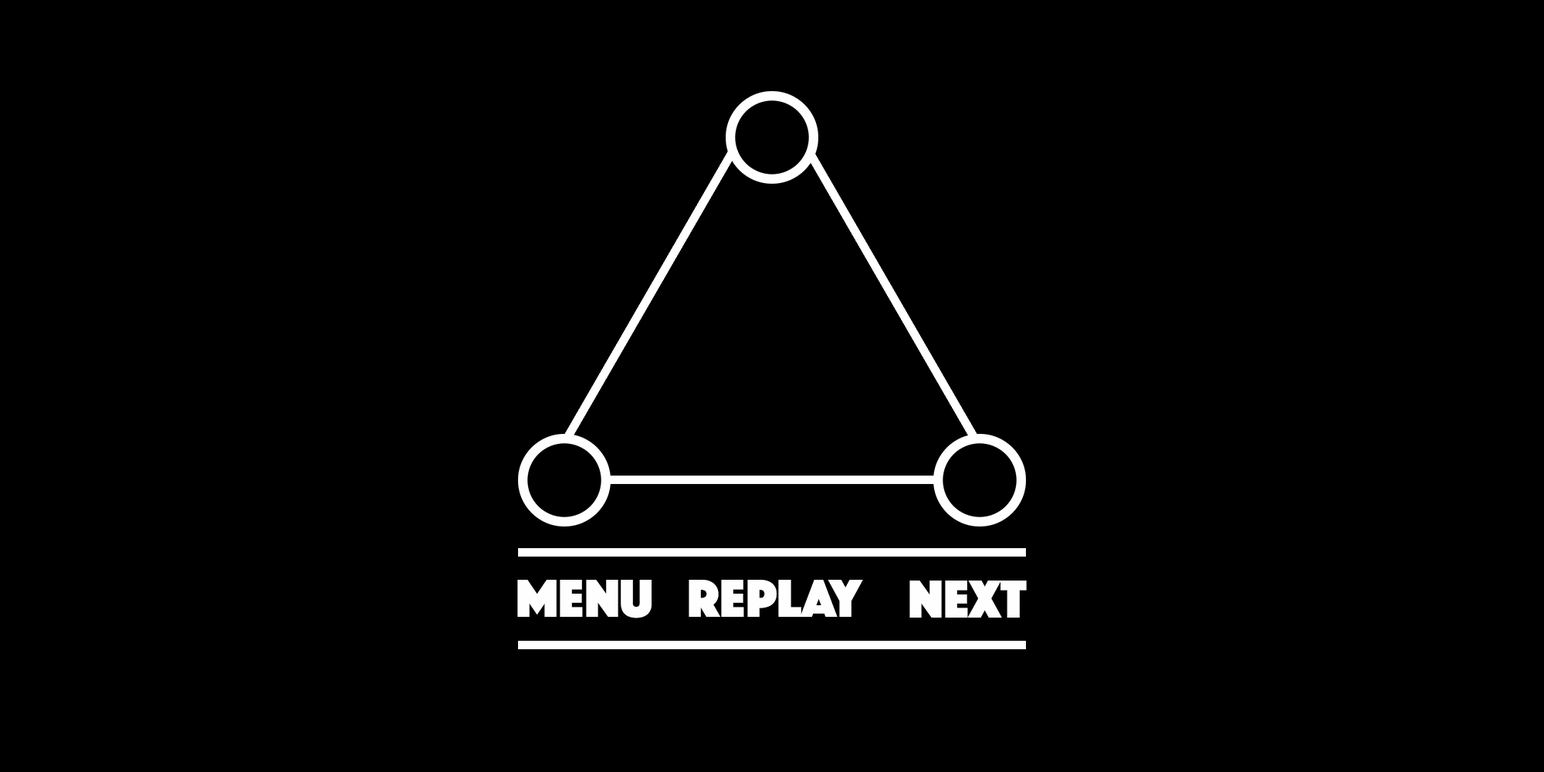
<style>
.page{position:relative;width:1544px;height:772px;background:#000000}
.page>*{position:absolute;margin:0}
.t1{font:55.6px "Phosphate-Solid";color:#fffefe}
</style>
<div class="page">
<p class="t1" style="left:517px;top:580px;width:135px;height:38px">Menu</p>
<p class="t1" style="left:689px;top:580px;width:174px;height:37px">replay</p>
<p class="t1" style="left:910px;top:581px;width:117px;height:37px">next</p>
</div>
